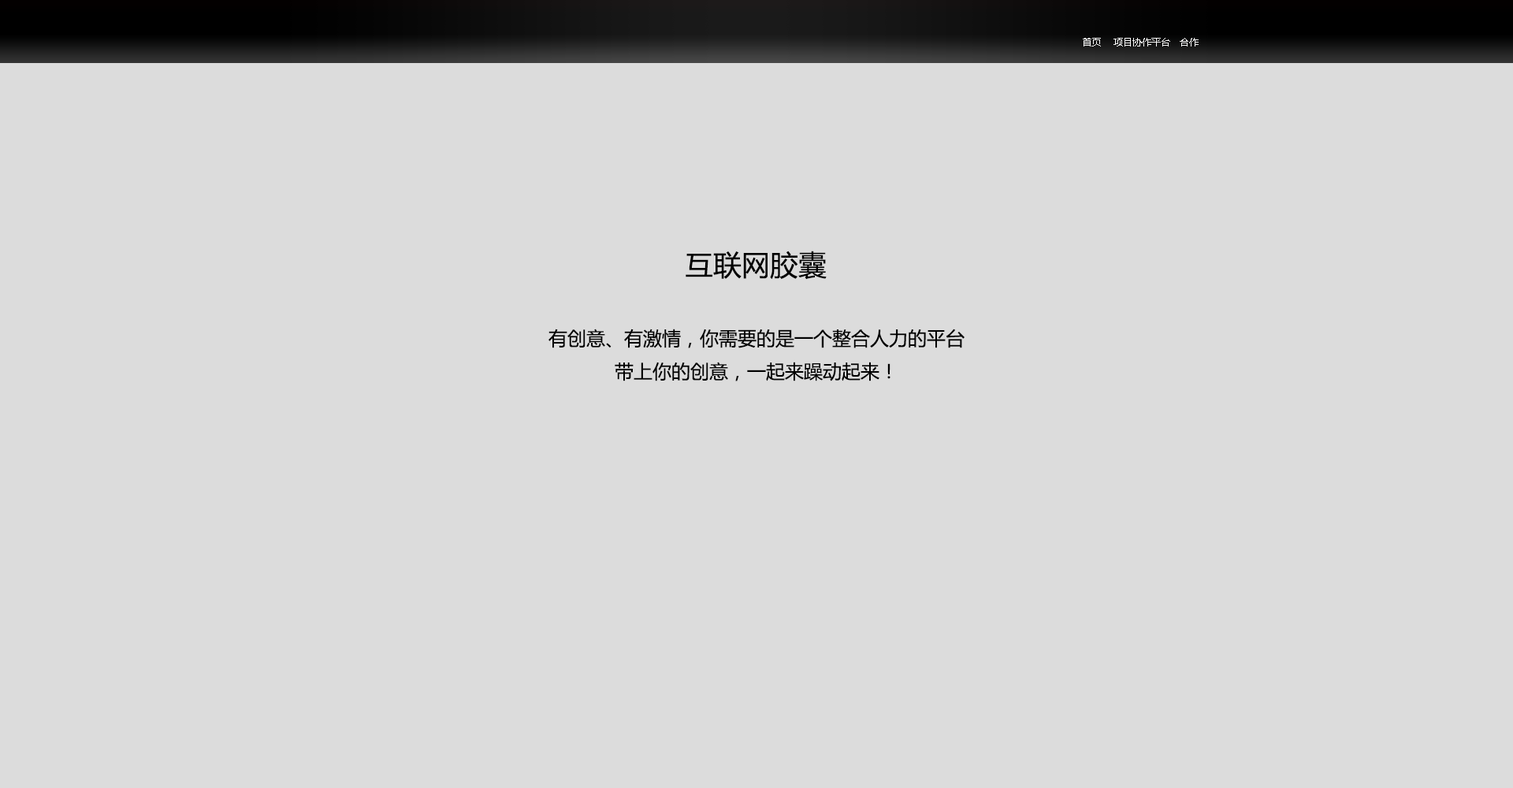
<style>
.page{position:relative;width:1513px;height:788px;background:#dcdcdc}
.page>*{position:absolute;margin:0}
.t1{font:9.5px "MicrosoftYaHei";color:#ffffff}
.t2{font:28.4px "MicrosoftYaHei";color:#000000}
.t3{font:18.9px "MicrosoftYaHei";color:#000000}
</style>
<div class="page">
<p class="t1" style="left:1083px;top:38px;width:116px;height:8px">首页    项目协作平台   合作</p>
<p class="t2" style="left:686px;top:251px;width:141px;height:29px">互联网胶囊</p>
<p class="t3" style="left:548px;top:329px;width:417px;height:52px;text-align:center">有创意、有激情，你需要的是一个整合人力的平台<br>带上你的创意，一起来躁动起来！</p>
</div>
